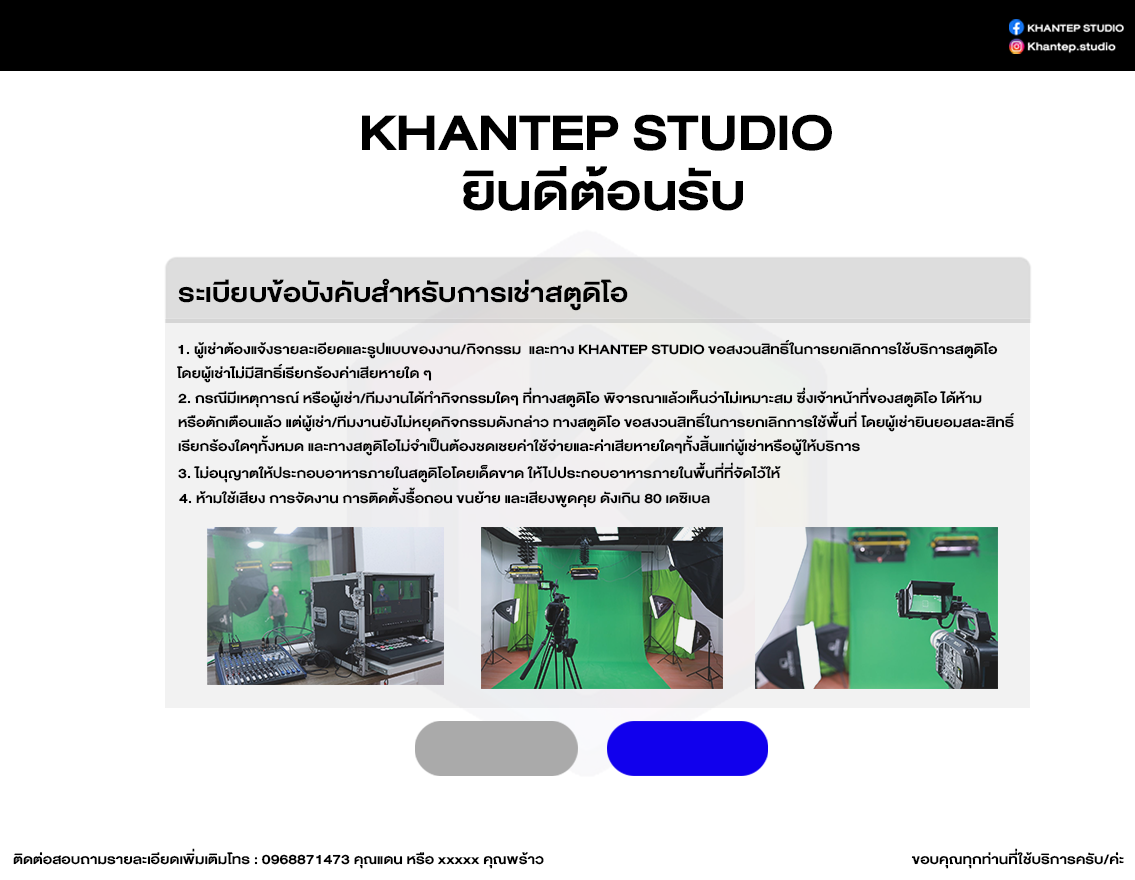
<style>
.page{position:relative;width:1135px;height:880px;background:#ffffff}
.page>*{position:absolute;margin:0}
.t1{font:75px/60px "DBHelvethaicaX-BdExt";color:#000000}
.t2{font:38.6px "DBHelvethaicaX-BdExt";color:#000000}
.t3{font:20px/24px "DBHelvethaicaX-BdExt";color:#000000}
.t4{font:20px "DBHelvethaicaX-BdExt";color:#000000}
</style>
<div class="page">
<p class="t1" style="left:362px;top:114px;width:470px;height:97px;text-align:center">KHANTEP STUDIO <br>ยินดีต้อนรับ</p>
<p class="t2" style="left:178px;top:278px;width:450px;height:33px">ระเบียบข้อบังคับสำหรับการเช่าสตูดิโอ</p>
<p class="t3" style="left:177px;top:339px;width:821px;height:44px">1. ผู้เช่าต้องแจ้งรายละเอียดและรูปแบบของงาน/กิจกรรม  และทาง KHANTEP STUDIO ขอสงวนสิทธิ์ในการยกเลิกการใช้บริการสตูดิโอ <br>โดยผู้เช่าไม่มีสิทธิ์เรียกร้องค่าเสียหายใด ๆ</p>
<p class="t3" style="left:178px;top:387px;width:836px;height:69px">2. กรณีมีเหตุการณ์ หรือผู้เช่า/ทีมงานได้ทำกิจกรรมใดๆ ที่ทางสตูดิโอ พิจารณาแล้วเห็นว่าไม่เหมาะสม ซึ่งเจ้าหน้าที่ของสตูดิโอ ได้ห้าม<br>หรือตักเตือนแล้ว แต่ผู้เช่า/ทีมงานยังไม่หยุดกิจกรรมดังกล่าว ทางสตูดิโอ ขอสงวนสิทธิ์ในการยกเลิกการใช้พื้นที่ โดยผู้เช่ายินยอมสละสิทธิ์<br>เรียกร้องใดๆทั้งหมด และทางสตูดิโอไม่จำเป็นต้องชดเชยค่าใช้จ่ายและค่าเสียหายใดๆทั้งสิ้นแก่ผู้เช่าหรือผู้ให้บริการ</p>
<p class="t4" style="left:178px;top:462px;width:603px;height:21px">3. ไม่อนุญาตให้ประกอบอาหารภายในสตูดิโอโดยเด็ดขาด ให้ไปประกอบอาหารภายในพื้นที่ที่จัดไว้ให้</p>
<p class="t4" style="left:179px;top:487px;width:531px;height:21px">4. ห้ามใช้เสียง การจัดงาน การติดตั้งรื้อถอน ขนย้าย และเสียงพูดคุย ดังเกิน 80 เดซิเบล</p>
<p class="t4" style="left:13px;top:848px;width:531px;height:21px">ติดต่อสอบถามรายละเอียดเพิ่มเติมโทร : 0968871473 คุณแดน หรือ xxxxx คุณพร้าว</p>
<p class="t4" style="left:911px;top:848px;width:213px;height:21px">ขอบคุณทุกท่านที่ใช้บริการครับ/ค่ะ</p>
</div>
